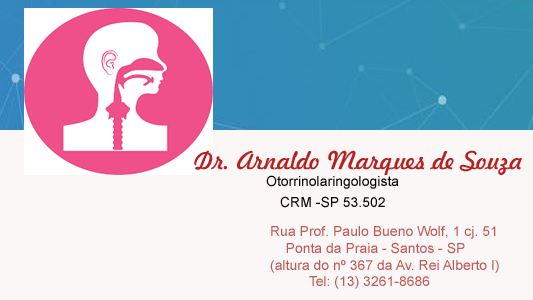
<style>
.page{position:relative;width:533px;height:300px;background:#fbf7f7}
.page>*{position:absolute;margin:0}
.t1{font:24px "Freehand521BT-RegularC";color:#ba1f1f}
.t2{font:14px "ArialMT";color:#0c0101}
.t3{font:14px "ArialMT";color:#c15858}
</style>
<div class="page">
<p class="t1" style="left:194px;top:150px;width:328px;height:25px">Dr. Arnaldo Marques de Souza</p>
<p class="t2" style="left:266px;top:175px;width:133px;height:14px">Otorrinolaringologista</p>
<p class="t2" style="left:280px;top:196px;width:105px;height:12px">CRM -SP 53.502</p>
<p class="t3" style="left:270px;top:226px;width:229px;height:63px">Rua Prof. Paulo Bueno Wolf, 1 cj. 51<br>    Ponta da Praia - Santos - SP <br>(altura do nº 367 da Av. Rei Alberto I)<br>          Tel: (13) 3261-8686</p>
</div>
